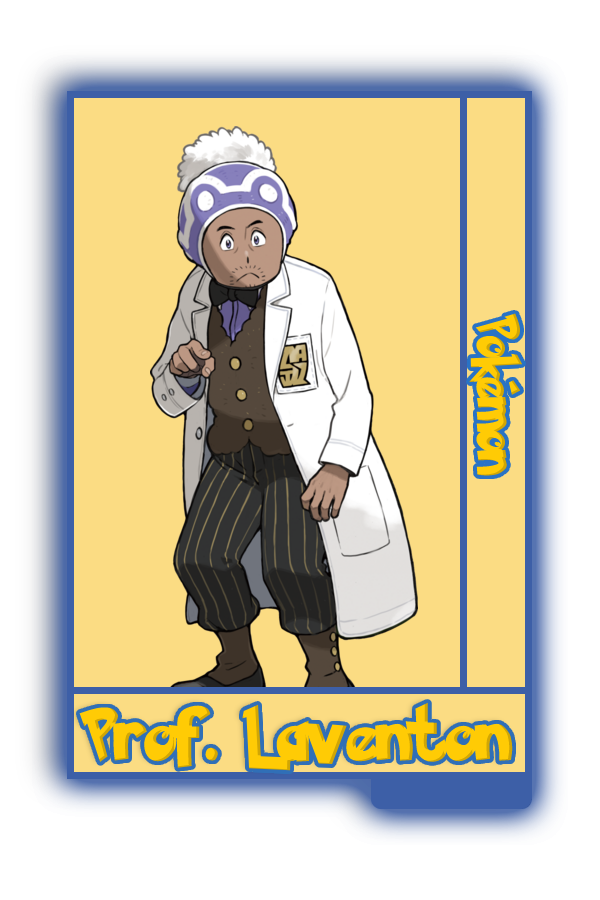
<style>
.page{position:relative;width:600px;height:900px;background:#fbdc83}
.page>*{position:absolute;margin:0}
.t1{font:48.8px "PokemonSolidNormal";color:#ffcb05;scale:0.8 1}
.t2{font:60.1px "PokemonSolidNormal";color:#ffcb05;scale:0.96 1}
</style>
<div class="page">
<p class="t1" style="left:469px;top:313px;width:54px;height:163px;rotate:90deg">Pokémon</p>
<p class="t2" style="left:79px;top:702px;width:434px;height:69px">Prof. Laventon</p>
</div>
